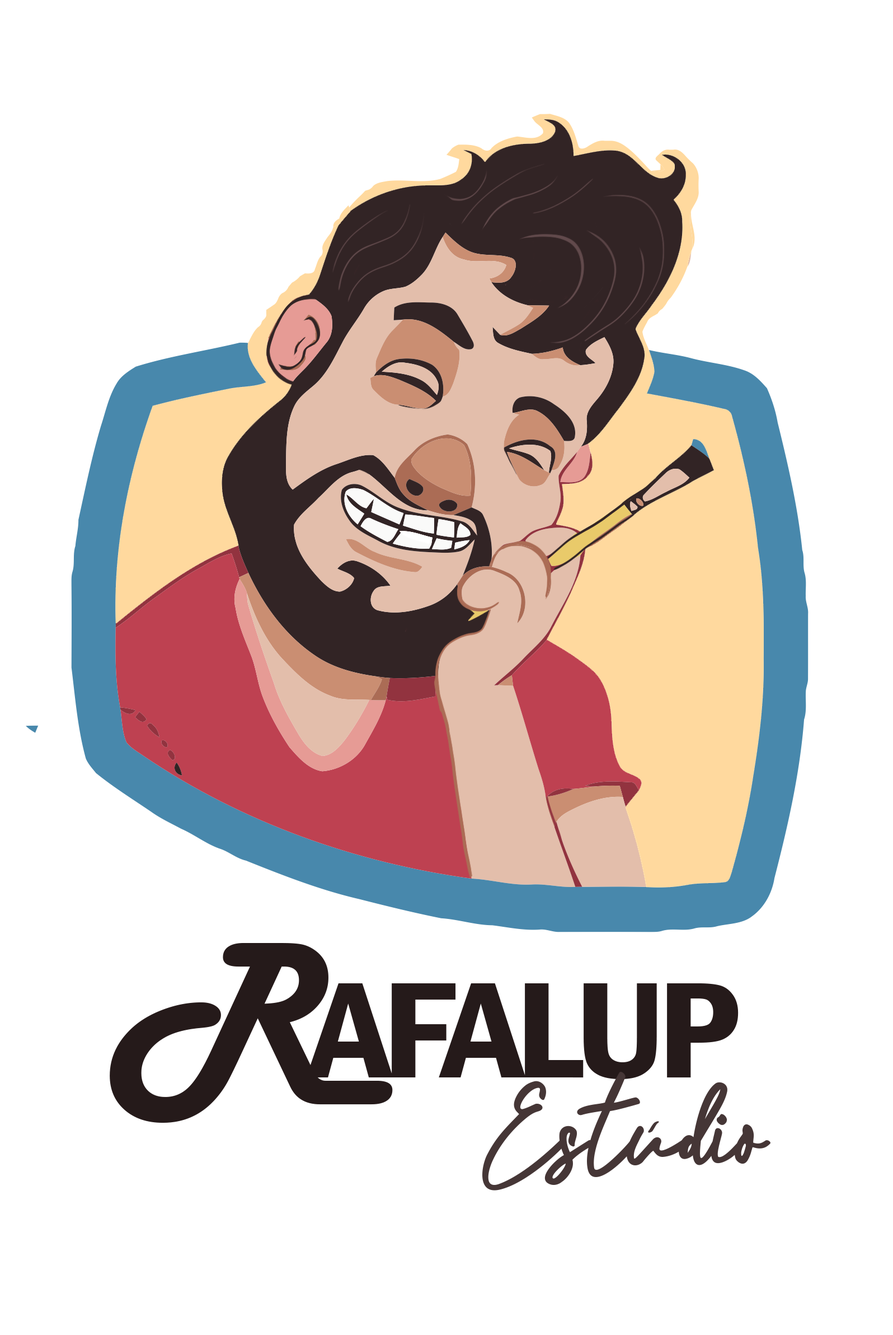
<style>
.page{position:relative;width:893px;height:1335px;background:#ffffff}
.page>*{position:absolute;margin:0}
.t1{font:201.7px "FranklinGothic-DemiCond";letter-spacing:-0.06em;color:#251a1a;font-variant:small-caps;scale:1.14 1}
.t2{font:201.7px "HarlowSolid";letter-spacing:-0.06em;color:#251a1a;scale:1.14 1}
.t3{font:116.3px "Shellia-Regular";color:#453636;scale:0.95 1}
</style>
<div class="page">
<p class="t1" style="left:110px;top:943px;width:629px;height:179px"><span class="t2">R</span>afalup</p>
<p class="t3" style="left:483px;top:1071px;width:288px;height:119px">Estúdio</p>
</div>
